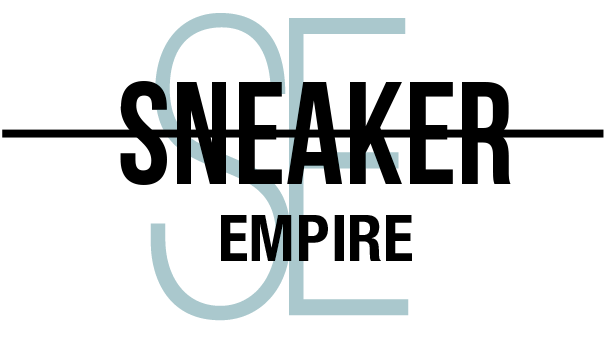
<style>
.page{position:relative;width:609px;height:345px;background:#ffffff}
.page>*{position:absolute;margin:0}
.t1{font:145.6px/76.6px "BebasNeueBold";letter-spacing:0.003em;color:#000000}
.t2{font:64.8px/76.6px "HelveticaNeueLTStd-BdCn";letter-spacing:0.003em;color:#000000}
</style>
<div class="page">
<p class="t1" style="left:120px;top:81px;width:391px;height:180px;text-align:center">SNEAKER<br><span class="t2">EMPIRE</span></p>
</div>
